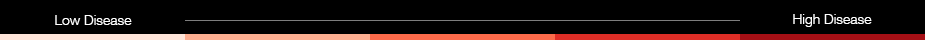
<style>
.page{position:relative;width:925px;height:40px;background:#000000}
.page>*{position:absolute;margin:0}
.t1{font:14px "HelveticaNeueLTCom-Lt";color:#ffffff}
</style>
<div class="page">
<p class="t1" style="left:55px;top:15px;width:77px;height:10px">Low Disease</p>
<p class="t1" style="left:793px;top:14px;width:79px;height:13px">High Disease</p>
</div>
